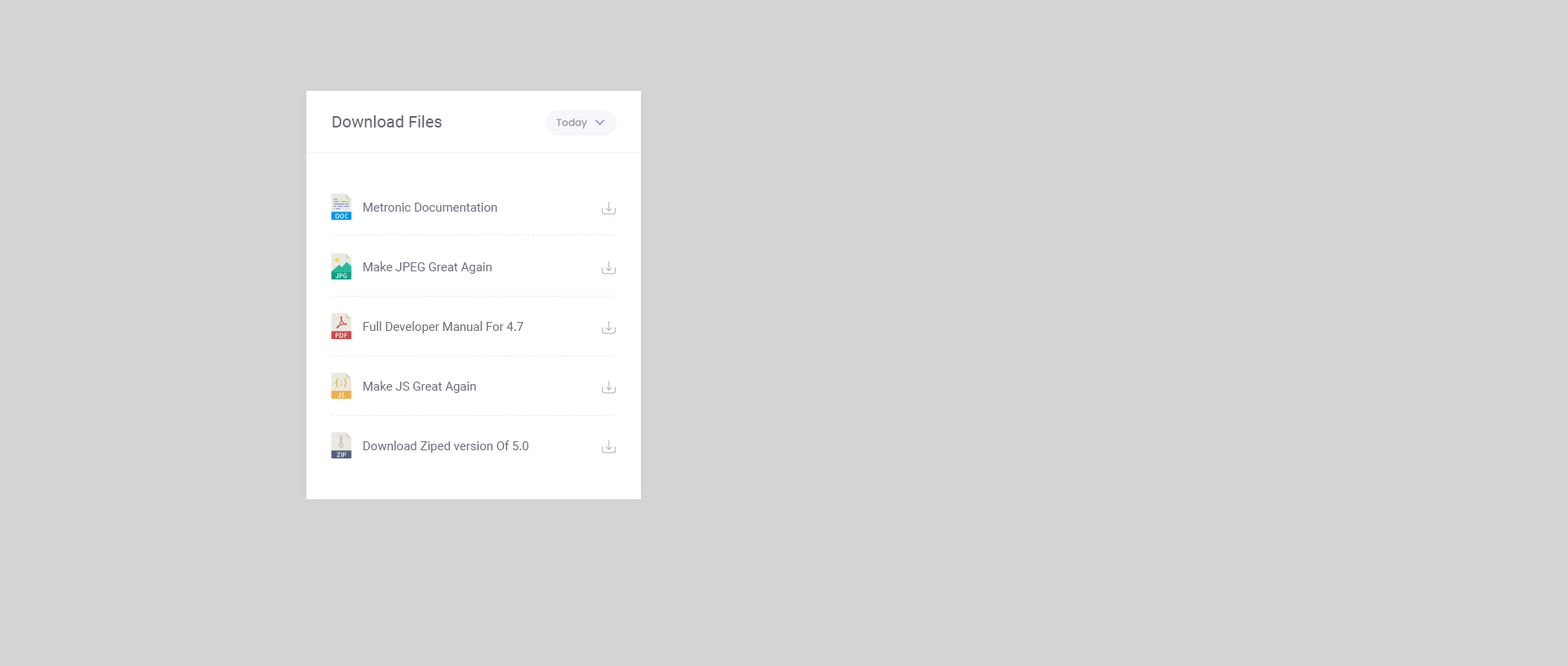
<style>
.page{position:relative;width:1568px;height:666px;background:#d4d4d4}
.page>*{position:absolute;margin:0}
.t1{font:16.3px "Roboto-Regular";color:#666674}
.t2{font:9.8px "Poppins-Medium";letter-spacing:0.02em;color:#9a9fae}
.t3{font:12.2px "Roboto-Regular";color:#6b6c7f}
</style>
<div class="page">
<p class="t1" style="left:332px;top:115px;width:110px;height:12px">Download Files</p>
<p class="t2" style="left:556px;top:118px;width:31px;height:11px">Today</p>
<p class="t3" style="left:363px;top:203px;width:134px;height:9px">Metronic Documentation</p>
<p class="t3" style="left:363px;top:261px;width:129px;height:13px">Make JPEG Great Again</p>
<p class="t3" style="left:363px;top:321px;width:160px;height:12px">Full Developer Manual For 4.7</p>
<p class="t3" style="left:363px;top:381px;width:113px;height:12px">Make JS Great Again</p>
<p class="t3" style="left:363px;top:440px;width:165px;height:12px">Download Ziped version Of 5.0</p>
</div>
